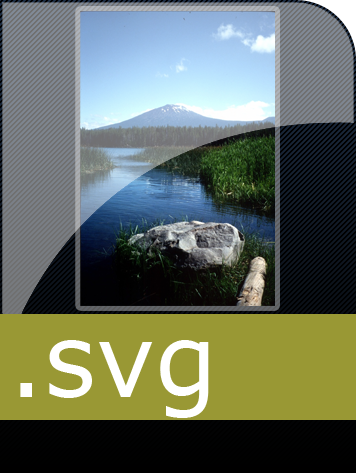
<style>
.page{position:relative;width:356px;height:473px;background:#999834}
.page>*{position:absolute;margin:0}
.t1{font:100px "Verdana";color:#ffffff}
</style>
<div class="page">
<p class="t1" style="left:20px;top:340px;width:189px;height:78px">.svg</p>
</div>
